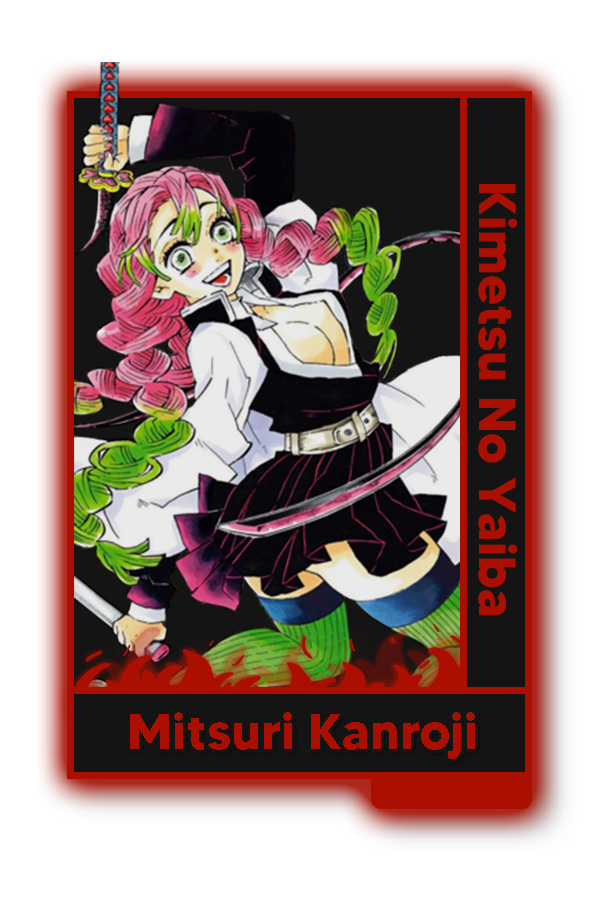
<style>
.page{position:relative;width:600px;height:900px;background:#ffffff}
.page>*{position:absolute;margin:0}
.t1{font:52px "MADETOMMY-Bold";color:#ab0f01}
.t2{font:50.5px "MADETOMMY-Bold";color:#ab0f01}
</style>
<div class="page">
<p class="t1" style="left:478px;top:184px;width:40px;height:431px;rotate:90deg">Kimetsu No Yaiba</p>
<p class="t2" style="left:130px;top:712px;width:345px;height:47px">Mitsuri Kanroji</p>
</div>
